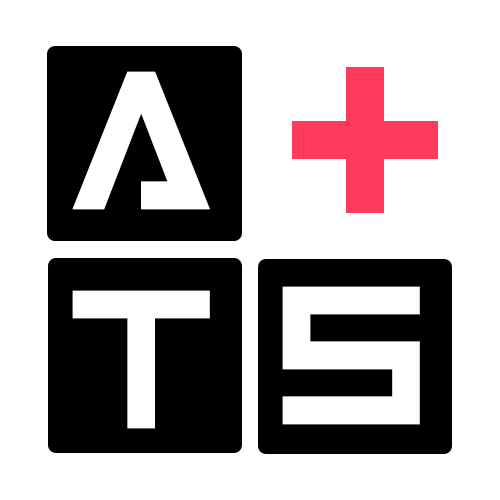
<style>
.page{position:relative;width:500px;height:500px;background:#ffffff}
.page>*{position:absolute;margin:0}
.t1{font:439.4px "Inversionz";color:#ffffff}
</style>
<div class="page">
<p class="t1" style="left:72px;top:71px;width:138px;height:139px">A</p>
<p class="t1" style="left:72px;top:290px;width:138px;height:139px">T</p>
<p class="t1" style="left:282px;top:286px;width:138px;height:139px">S</p>
</div>
